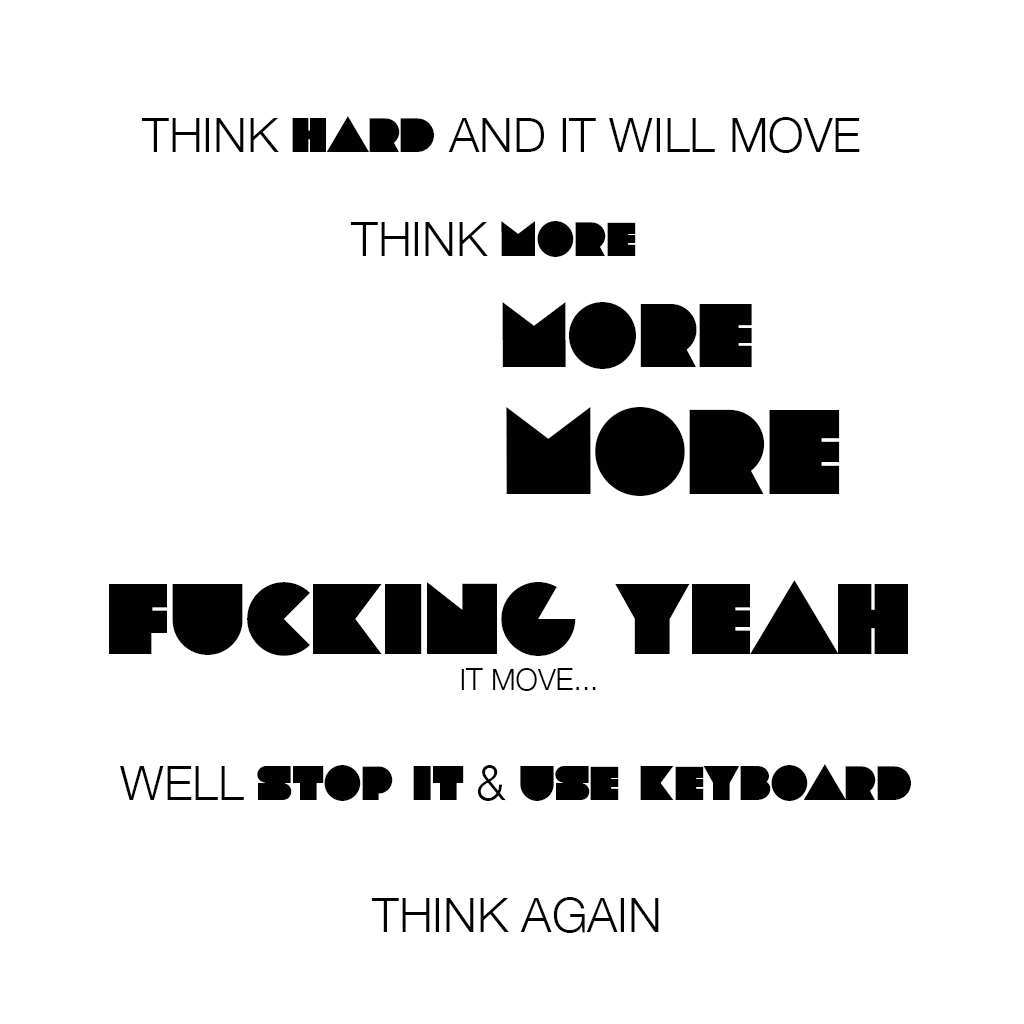
<style>
.page{position:relative;width:1024px;height:1024px;background:#ffffff}
.page>*{position:absolute;margin:0}
.t1{font:48px "HelveticaNeue-Light";color:#020202}
.t2{font:48px "Lot";color:#020202}
.t3{font:90px "Lot";color:#020202}
.t4{font:120px "Lot";color:#020202}
.t5{font:100px "Lot";color:#020202}
.t6{font:30px "HelveticaNeue-Light";color:#020202}
</style>
<div class="page">
<p class="t1" style="left:141px;top:116px;width:719px;height:37px">THINK <span class="t2">HARD</span> AND IT WILL MOVE</p>
<p class="t1" style="left:350px;top:221px;width:286px;height:36px">THINK <span class="t2">MORE</span></p>
<p class="t3" style="left:502px;top:302px;width:250px;height:67px">MORE</p>
<p class="t4" style="left:506px;top:407px;width:334px;height:89px">MORE</p>
<p class="t5" style="left:109px;top:580px;width:799px;height:111px;text-align:center">FUCKING YEAH <br><span class="t6">IT MOVE...</span></p>
<p class="t2" style="left:120px;top:764px;width:791px;height:37px"><span class="t1">WELL </span>STOP IT <span class="t1">&amp; </span>USE KEYBOARD</p>
<p class="t1" style="left:371px;top:897px;width:288px;height:36px">THINK AGAIN</p>
</div>
